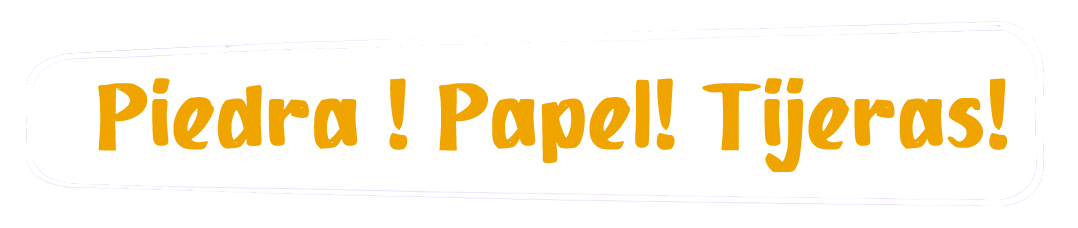
<style>
.page{position:relative;width:1078px;height:228px;background:#ffffff}
.page>*{position:absolute;margin:0}
.t1{font:95px "bBucket";color:#f0a400}
</style>
<div class="page">
<p class="t1" style="left:98px;top:77px;width:909px;height:95px">Piedra ! Papel! Tijeras!</p>
</div>
